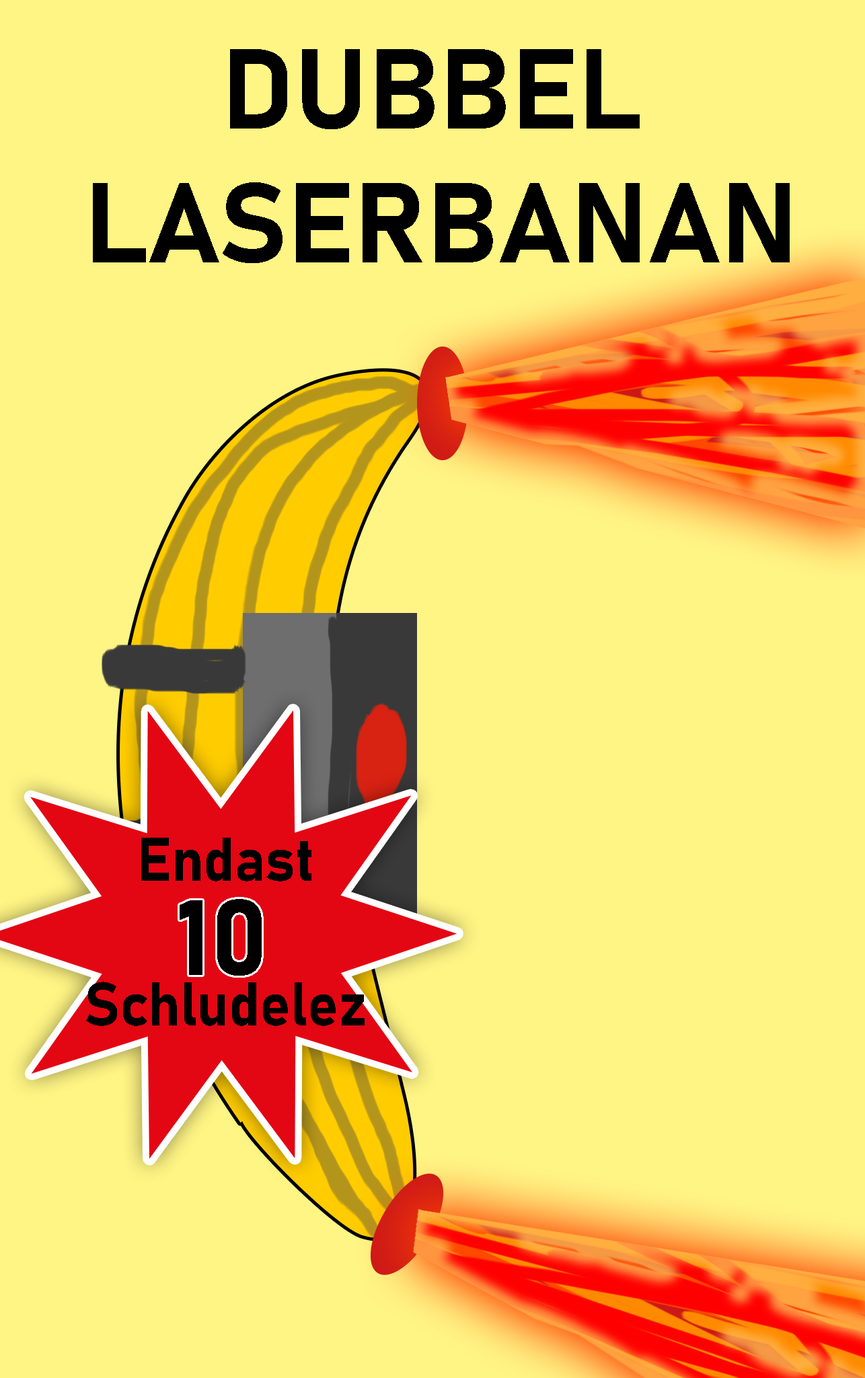
<style>
.page{position:relative;width:865px;height:1378px;background:#fff584}
.page>*{position:absolute;margin:0}
.t1{font:111.5px "Bahnschrift-Bold";color:#000000}
.t2{font:60.3px "Bahnschrift-Bold";color:#000000;scale:0.96 1}
.t3{font:60.3px "Bahnschrift-Bold";color:#e30613;scale:0.96 1}
.t4{font:105.5px "Bahnschrift-Bold";color:#000000}
</style>
<div class="page">
<p class="t1" style="left:93px;top:49px;width:697px;height:214px;text-align:center">DUBBEL <br>LASERBANAN</p>
<p class="t2" style="left:86px;top:838px;width:279px;height:188px;text-align:center">Endast<br><span class="t3">10</span> <br>Schludelez</p>
<p class="t4" style="left:180px;top:899px;width:82px;height:77px">10</p>
</div>
